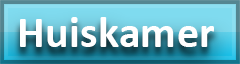
<style>
.page{position:relative;width:240px;height:64px}
.page>*{position:absolute;margin:0}
.t1{font:44.4px "Calibri-Bold";color:#ffffff}
</style>
<div class="page">
<p class="t1" style="left:20px;top:17px;width:194px;height:30px">Huiskamer</p>
</div>
